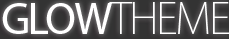
<style>
.page{position:relative;width:229px;height:39px}
.page>*{position:absolute;margin:0}
.t1{font:42px "KozGoPro-ExtraLight";letter-spacing:-0.05em;color:#ffffff}
.t2{font:45px "MyriadPro-Regular";letter-spacing:-0.05em;color:#ffffff}
</style>
<div class="page">
<p class="t1" style="left:2px;top:2px;width:227px;height:32px"><span class="t2">GLOW</span>THEME</p>
</div>
